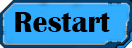
<style>
.page{position:relative;width:132px;height:48px;background:#33adff}
.page>*{position:absolute;margin:0}
.t1{font:30px "BritannicBold";color:#000000}
.t2{font:30px "AdobeFanHeitiStd-Bold";color:#000000}
</style>
<div class="page">
<p class="t1" style="left:15px;top:12px;width:95px;height:20px"><span class="t2">  </span>Restart</p>
</div>
